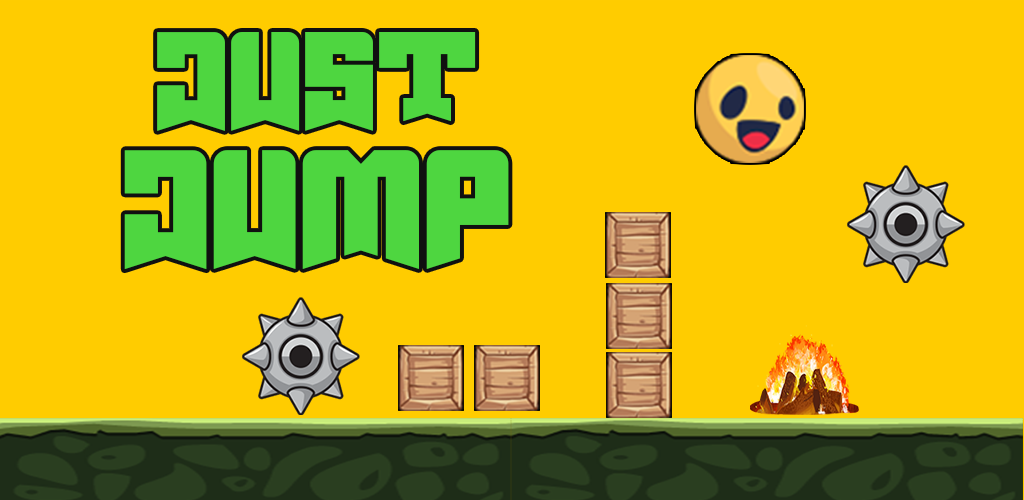
<style>
.page{position:relative;width:1024px;height:500px;background:#ffcc00}
.page>*{position:absolute;margin:0}
.t1{font:219.7px/135.8px "Robus";color:#4ed640}
.t2{font:264.2px/135.8px "Robus";color:#4ed640}
</style>
<div class="page">
<p class="t1" style="left:124px;top:32px;width:385px;height:238px;text-align:center">just<br><span class="t2">jump</span></p>
</div>
